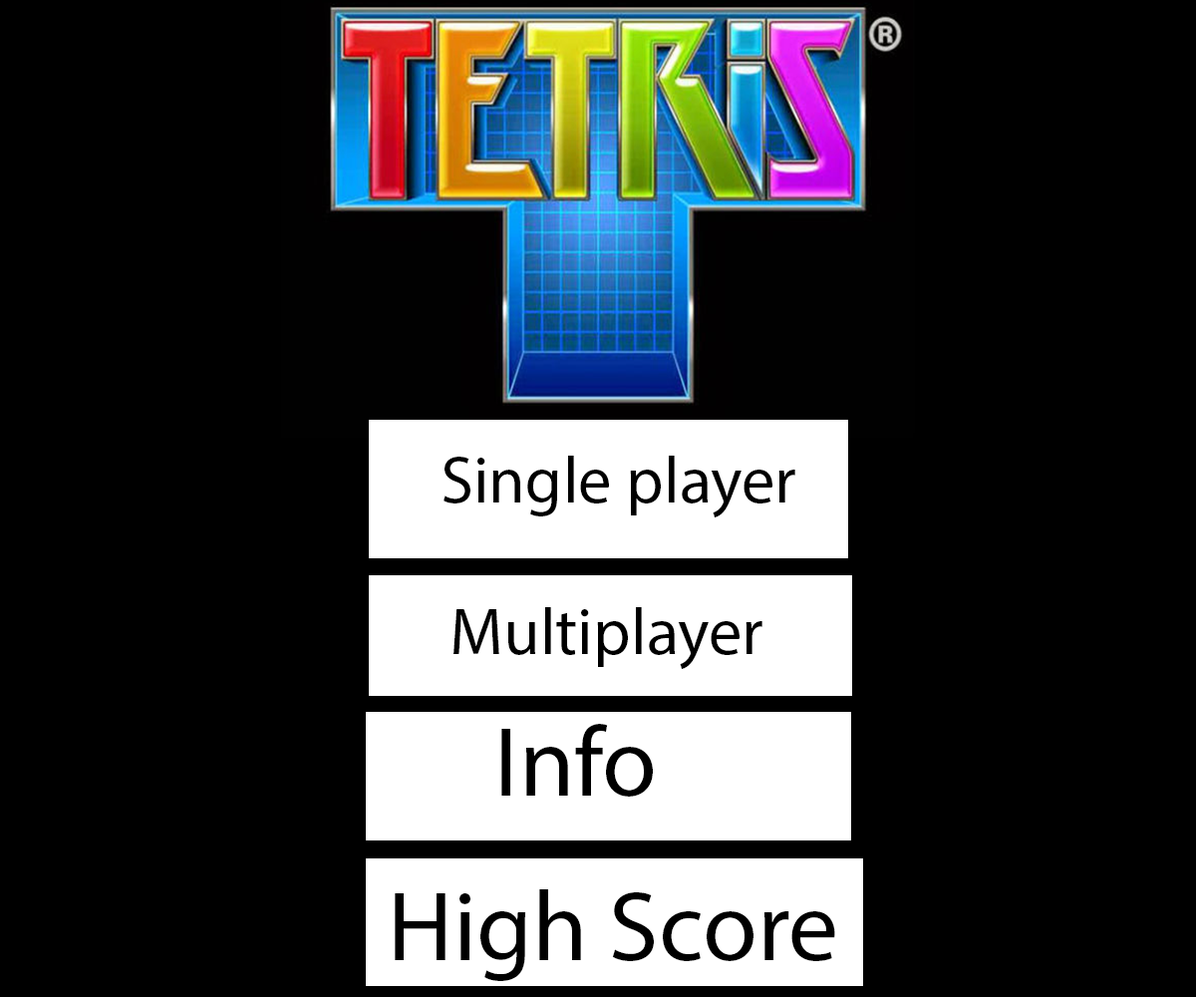
<style>
.page{position:relative;width:1196px;height:997px;background:#000000}
.page>*{position:absolute;margin:0}
.t1{font:66.5px "MyriadPro-Regular";color:#000000}
.t2{font:99.7px "MyriadPro-Regular";color:#000000}
</style>
<div class="page">
<p class="t1" style="left:444px;top:456px;width:351px;height:61px">Single player</p>
<p class="t1" style="left:454px;top:607px;width:309px;height:62px">Multiplayer</p>
<p class="t2" style="left:501px;top:724px;width:152px;height:72px">Info</p>
<p class="t2" style="left:395px;top:889px;width:440px;height:92px">High Score</p>
</div>
